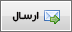
<style>
.page{position:relative;width:72px;height:32px}
.page>*{position:absolute;margin:0}
.t1{font:12px "Mj_CasablancaLight";color:#030000}
</style>
<div class="page">
<p class="t1" style="left:12px;top:11px;width:27px;height:11px">ارسـال</p>
</div>
